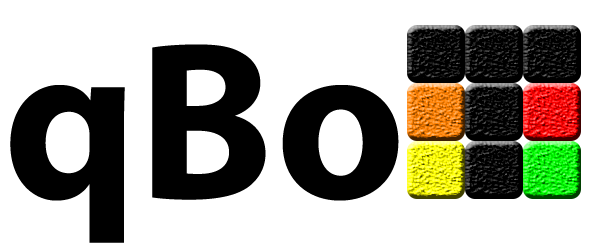
<style>
.page{position:relative;width:600px;height:250px;background:#ffffff}
.page>*{position:absolute;margin:0}
.t1{font:226px "MyriadPro-Bold";color:#000000}
</style>
<div class="page">
<p class="t1" style="left:10px;top:44px;width:389px;height:199px">qBo</p>
</div>
